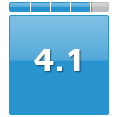
<style>
.page{position:relative;width:117px;height:117px;background:#2793cf}
.page>*{position:absolute;margin:0}
.t1{font:36px "Colaborate-Bold";color:#ffffff;text-transform:uppercase}
</style>
<div class="page">
<p class="t1" style="left:34px;top:49px;width:46px;height:22px">4.1</p>
</div>
